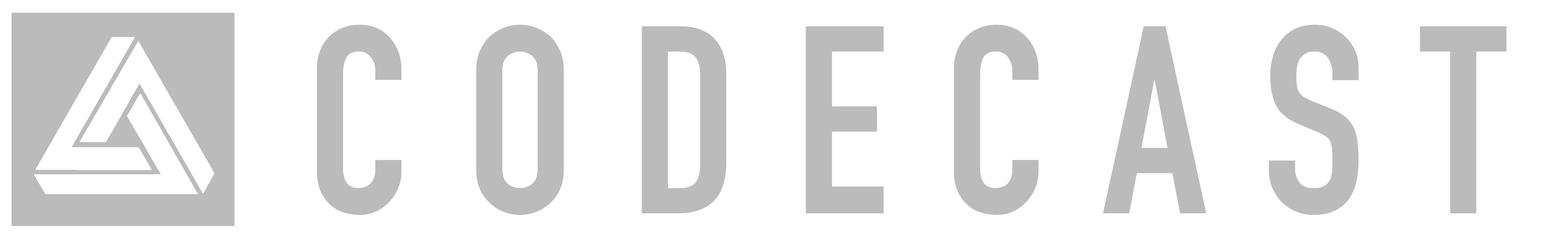
<style>
.page{position:relative;width:1568px;height:239px;background:#ffffff}
.page>*{position:absolute;margin:0}
.t1{font:262.1px "DINCondensed-Bold";letter-spacing:0.215em;color:#bbbbbb}
</style>
<div class="page">
<p class="t1" style="left:317px;top:25px;width:1189px;height:190px">CODECAST</p>
</div>
